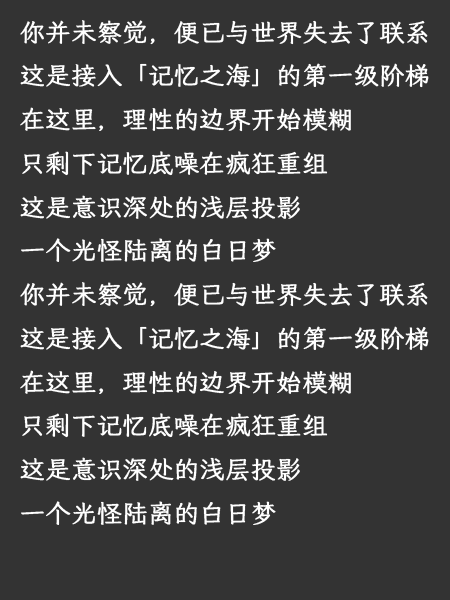
<style>
.page{position:relative;width:450px;height:600px;background:#333333}
.page>*{position:absolute;margin:0}
.t1{font:25px "LXGWWenKaiLite-Light";color:#ffffff;font-weight:bold}
</style>
<div class="page">
<p class="t1" style="left:20px;top:20px;width:409px;height:505px">你并未察觉，便已与世界失去了联系<br>这是接入「记忆之海」的第一级阶梯<br>在这里，理性的边界开始模糊<br>只剩下记忆底噪在疯狂重组<br>这是意识深处的浅层投影<br>一个光怪陆离的白日梦<br>你并未察觉，便已与世界失去了联系<br>这是接入「记忆之海」的第一级阶梯<br>在这里，理性的边界开始模糊<br>只剩下记忆底噪在疯狂重组<br>这是意识深处的浅层投影<br>一个光怪陆离的白日梦</p>
</div>
